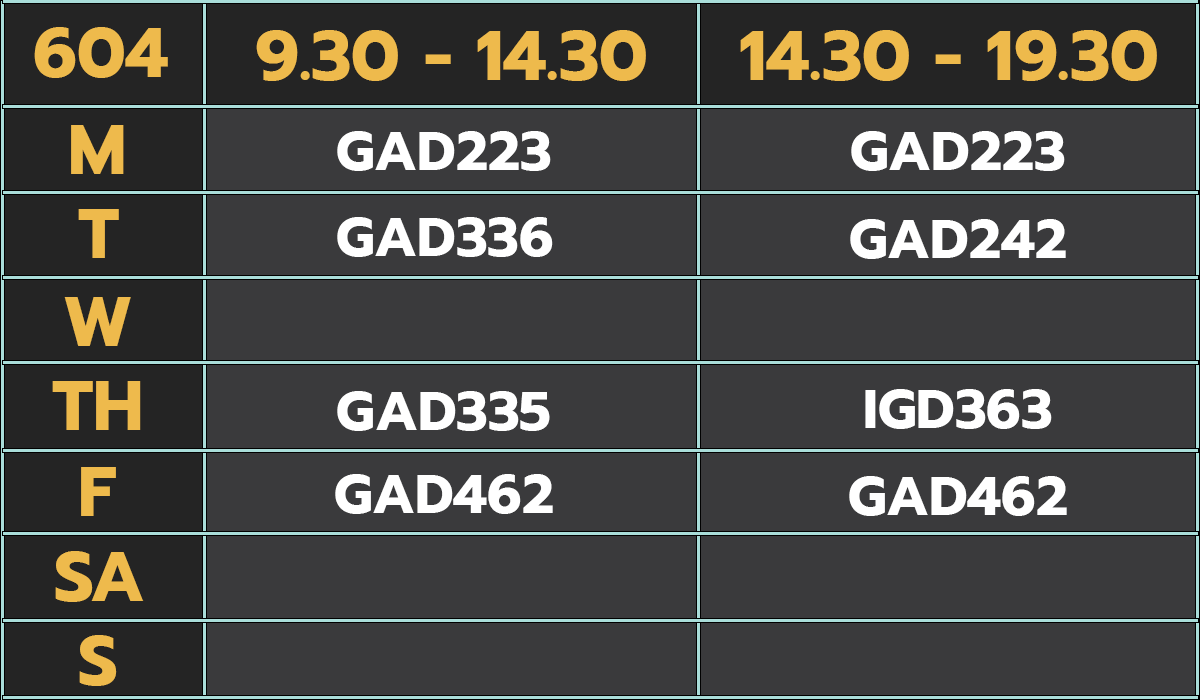
<style>
.page{position:relative;width:1200px;height:700px;background:#3a3a3c}
.page>*{position:absolute;margin:0}
.t1{font:70px "Prompt-Bold";color:#eeba4c}
.t2{font:55px "Prompt-Bold";color:#ffffff}
</style>
<div class="page">
<p class="t1" style="left:34px;top:27px;width:134px;height:51px">604</p>
<p class="t1" style="left:256px;top:30px;width:390px;height:51px">9.30 - 14.30</p>
<p class="t1" style="left:740px;top:30px;width:417px;height:51px">14.30 - 19.30</p>
<p class="t1" style="left:71px;top:125px;width:53px;height:49px">M</p>
<p class="t2" style="left:337px;top:131px;width:214px;height:40px">GAD223</p>
<p class="t2" style="left:851px;top:131px;width:214px;height:40px">GAD223</p>
<p class="t1" style="left:78px;top:209px;width:41px;height:49px">T</p>
<p class="t2" style="left:337px;top:217px;width:216px;height:40px">GAD336</p>
<p class="t2" style="left:850px;top:219px;width:216px;height:40px">GAD242</p>
<p class="t1" style="left:64px;top:297px;width:67px;height:49px">W</p>
<p class="t1" style="left:52px;top:381px;width:89px;height:49px">TH</p>
<p class="t2" style="left:865px;top:389px;width:187px;height:40px">IGD363</p>
<p class="t2" style="left:337px;top:391px;width:213px;height:40px">GAD335</p>
<p class="t1" style="left:81px;top:467px;width:35px;height:49px">F</p>
<p class="t2" style="left:335px;top:474px;width:218px;height:40px">GAD462</p>
<p class="t2" style="left:849px;top:476px;width:218px;height:40px">GAD462</p>
<p class="t1" style="left:55px;top:551px;width:89px;height:51px">SA</p>
<p class="t1" style="left:79px;top:635px;width:38px;height:51px">S</p>
</div>
